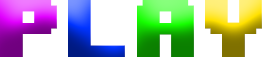
<style>
.page{position:relative;width:262px;height:57px;background:#ffffff}
.page>*{position:absolute;margin:0}
.t1{font:68.2px "8BITWONDERNominal"}
</style>
<div class="page">
<p class="t1" style="left:0px;top:0px;width:262px;height:57px">play</p>
<p class="t1" style="left:0px;top:0px;width:262px;height:57px">play</p>
</div>
